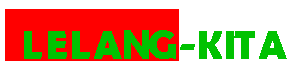
<style>
.page{position:relative;width:297px;height:71px;background:#ffffff}
.page>*{position:absolute;margin:0}
.t1{font:41.1px "BerlinSansFBDemi-Bold";color:#01c201}
</style>
<div class="page">
<p class="t1" style="left:24px;top:30px;width:263px;height:29px">LELANG-KITA</p>
</div>
